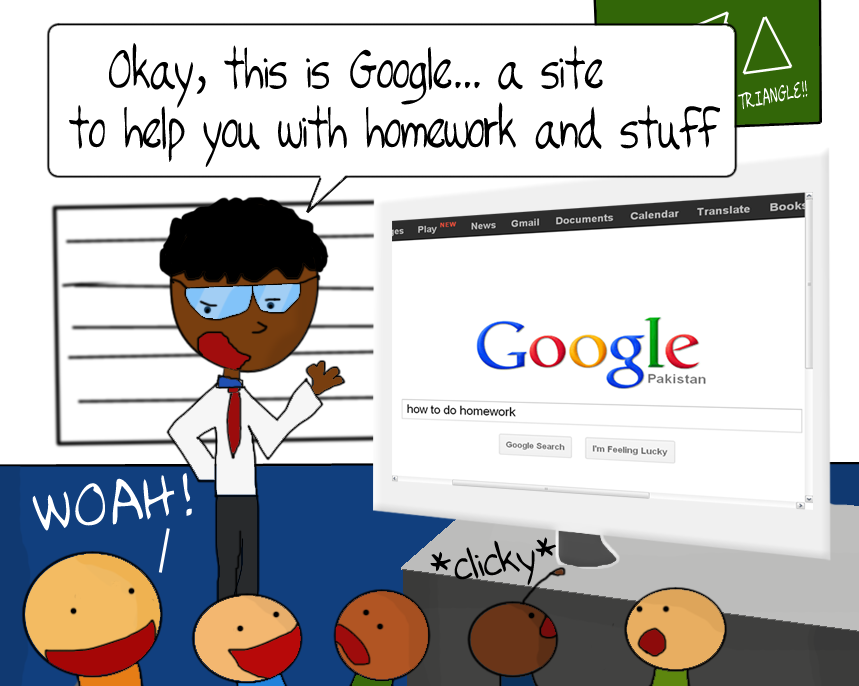
<style>
.page{position:relative;width:859px;height:686px;background:#ffffff}
.page>*{position:absolute;margin:0}
.t1{font:56.2px/14.8px "RyansHand-Plain";letter-spacing:-0.009em;color:#000000;scale:0.77 1}
.t2{font:23.3px "RyansHand-Plain";letter-spacing:-0.009em;color:#ffffff;scale:0.58 1}
.t3{font:42.6px "RyansHand-Plain";letter-spacing:-0.009em;color:#000000}
</style>
<div class="page">
<p class="t1" style="left:69px;top:43px;width:651px;height:124px">Okay, this is Google... a site<br> <br><br><br>  to help you with homework and stuff</p>
<p class="t2" style="left:737px;top:80px;width:71px;height:30px;rotate:-12deg">TRIANGLE!!</p>
<p class="t3" style="left:430px;top:537px;width:126px;height:49px;rotate:-8deg">*clicky*</p>
</div>
